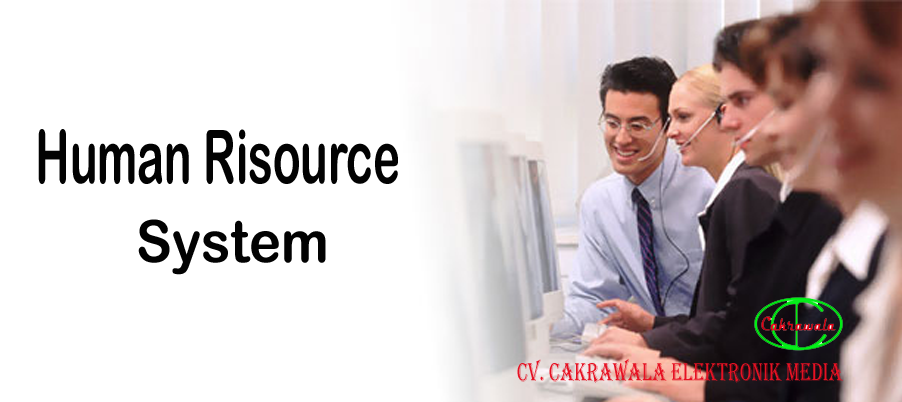
<style>
.page{position:relative;width:902px;height:402px;background:#ffffff}
.page>*{position:absolute;margin:0}
.t1{font:74px "ArialRoundedMTBold";color:#020202;scale:0.61 1}
.t2{font:58.1px "ArialRoundedMTBold";color:#020202;scale:0.93 1}
.t3{font:26.4px "Algerian";color:#e61123;scale:0.71 1}
</style>
<div class="page">
<p class="t1" style="left:38px;top:129px;width:360px;height:55px">Human Risource</p>
<p class="t2" style="left:138px;top:219px;width:188px;height:56px">System</p>
<p class="t3" style="left:517px;top:358px;width:326px;height:25px">CV. CAKRAWALA ELEKTRONIK MEDIA</p>
</div>
